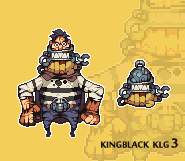
<style>
.page{position:relative;width:185px;height:161px;background:#f3ce58}
.page>*{position:absolute;margin:0}
.t1{font:12px "SakkalMajallaBold";color:#101010}
.t2{font:18px "SakkalMajallaBold";color:#101010}
</style>
<div class="page">
<p class="t1" style="left:101px;top:138px;width:77px;height:10px">KINGBLACK  KLG <span class="t2">3</span></p>
</div>
